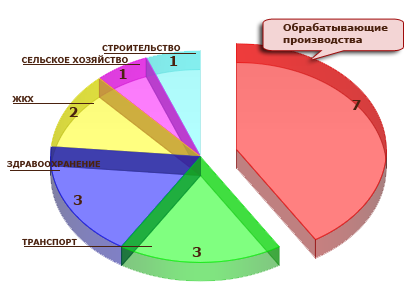
<style>
.page{position:relative;width:407px;height:299px;background:#ffffff}
.page>*{position:absolute;margin:0}
.t1{font:10px "Verdana-Bold";color:#4a220f}
.t2{font:8px "Verdana-Bold";color:#4a220f}
.t3{font:14px "Verdana-Bold";color:#4a220f}
</style>
<div class="page">
<p class="t1" style="left:283px;top:23px;width:105px;height:22px">Обрабатывающие <br>производства</p>
<p class="t2" style="left:102px;top:44px;width:79px;height:8px">СТРОИТЕЛЬСТВО</p>
<p class="t2" style="left:21px;top:55px;width:107px;height:9px">СЕЛЬСКОЕ ХОЗЯЙСТВО</p>
<p class="t2" style="left:12px;top:95px;width:22px;height:8px">ЖКХ</p>
<p class="t3" style="left:352px;top:100px;width:9px;height:10px">7</p>
<p class="t2" style="left:7px;top:160px;width:94px;height:9px">ЗДРАВООХРАНЕНИЕ</p>
<p class="t2" style="left:22px;top:238px;width:55px;height:8px">ТРАНСПОРТ</p>
</div>
